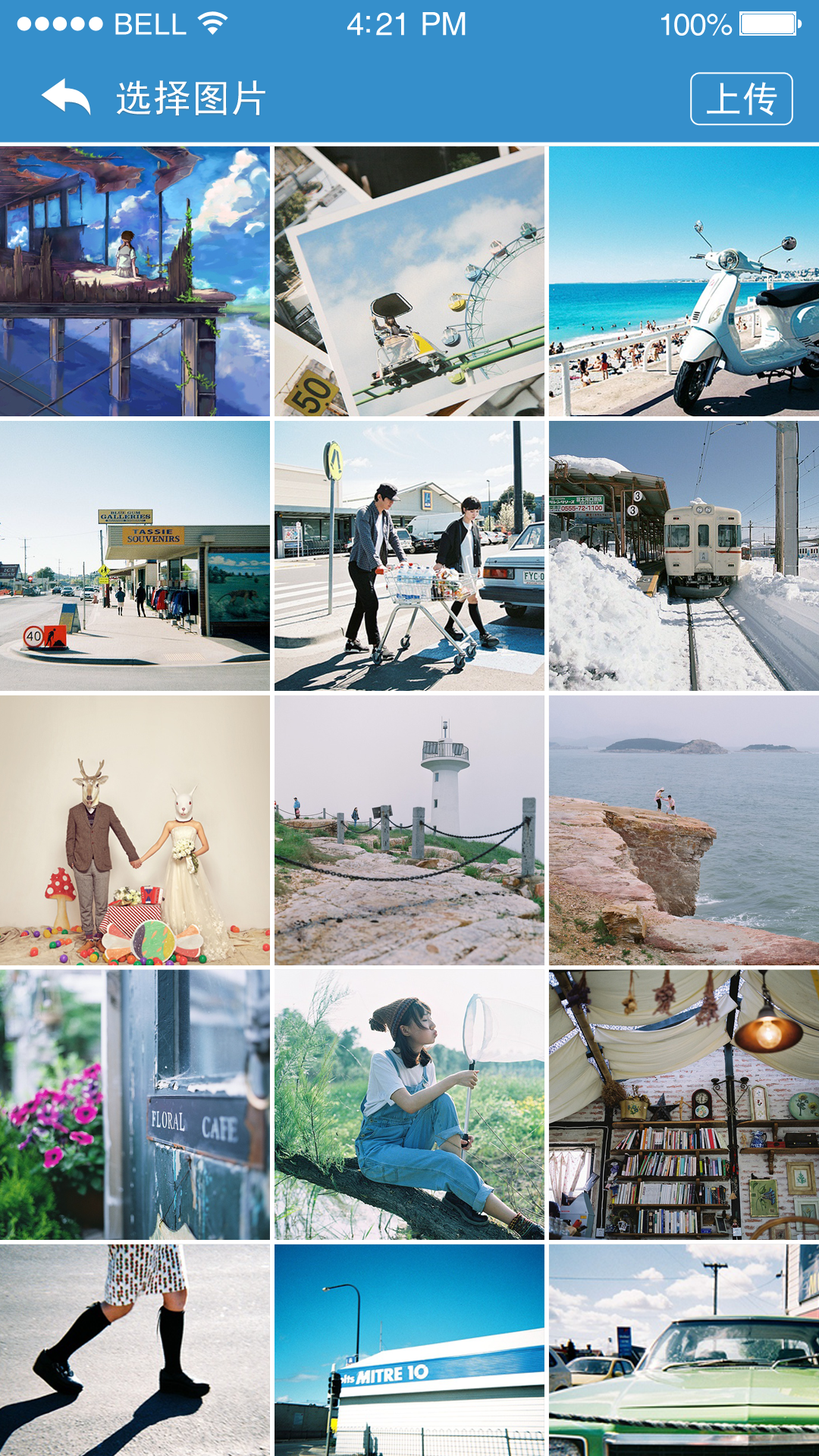
<style>
.page{position:relative;width:819px;height:1456px}
.page>*{position:absolute;margin:0}
.t1{font:29.3px "Helvetica";letter-spacing:0.02em;color:#ffffff}
.t2{font:31.8px "Helvetica";letter-spacing:-0.02em;color:#ffffff}
.t3{font:30.6px "Helvetica";letter-spacing:-0.02em;color:#ffffff}
.t4{font:37.9px "SimHei";letter-spacing:0.025em;color:#ffffff}
.t5{font:36.4px "SimHei";letter-spacing:0.025em;color:#ffffff}
</style>
<div class="page">
<p class="t1" style="left:115px;top:13px;width:72px;height:22px">BELL</p>
<p class="t2" style="left:347px;top:12px;width:119px;height:24px">4:21 PM</p>
<p class="t3" style="left:661px;top:14px;width:72px;height:22px">100%</p>
<p class="t4" style="left:116px;top:80px;width:149px;height:36px">选择图片</p>
<p class="t5" style="left:707px;top:82px;width:70px;height:34px">上传</p>
</div>
